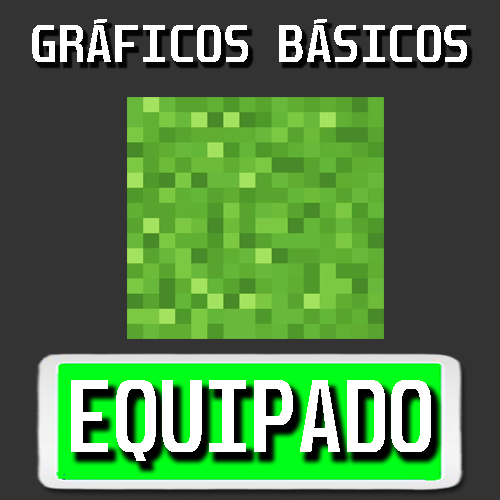
<style>
.page{position:relative;width:500px;height:500px;background:#333333}
.page>*{position:absolute;margin:0}
.t1{font:45px "Unispace-Bold";color:#ffffff}
.t2{font:88.1px "Unispace-Bold";color:#ffffff;scale:0.85 1}
.t3{font:87.7px "Unispace-Bold";color:#ffffff;scale:0.85 1}
</style>
<div class="page">
<p class="t1" style="left:32px;top:19px;width:435px;height:43px">GRÁFICOS BÁSICOS</p>
<p class="t2" style="left:71px;top:380px;width:360px;height:81px">EQUIPA<span class="t3">DO</span></p>
</div>
